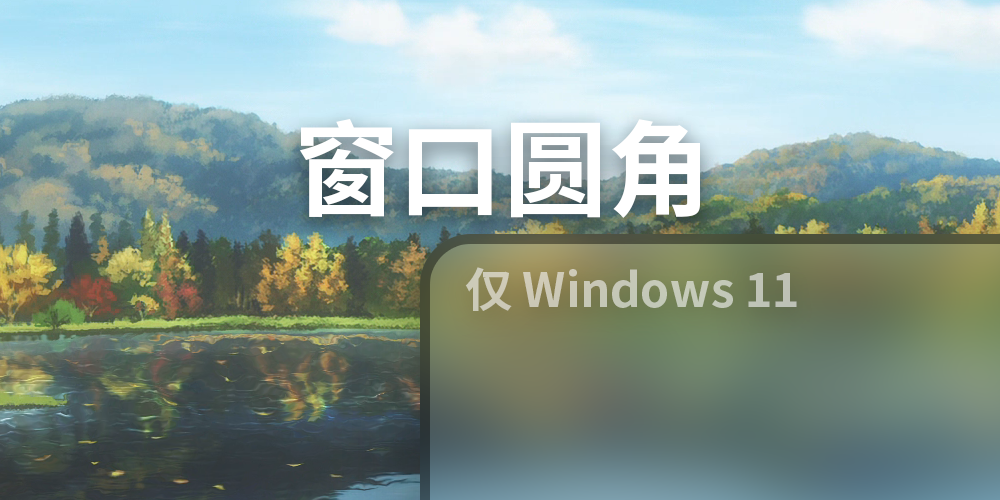
<style>
.page{position:relative;width:1000px;height:500px}
.page>*{position:absolute;margin:0}
.t1{font:104.6px "NotoSansSC-Bold";color:#ffffff}
.t2{font:47.1px "NotoSansSC-Bold";color:#c6c8b7}
</style>
<div class="page">
<p class="t1" style="left:300px;top:119px;width:400px;height:99px">窗口圆角</p>
<p class="t2" style="left:465px;top:267px;width:332px;height:44px">仅 Windows 11</p>
</div>
